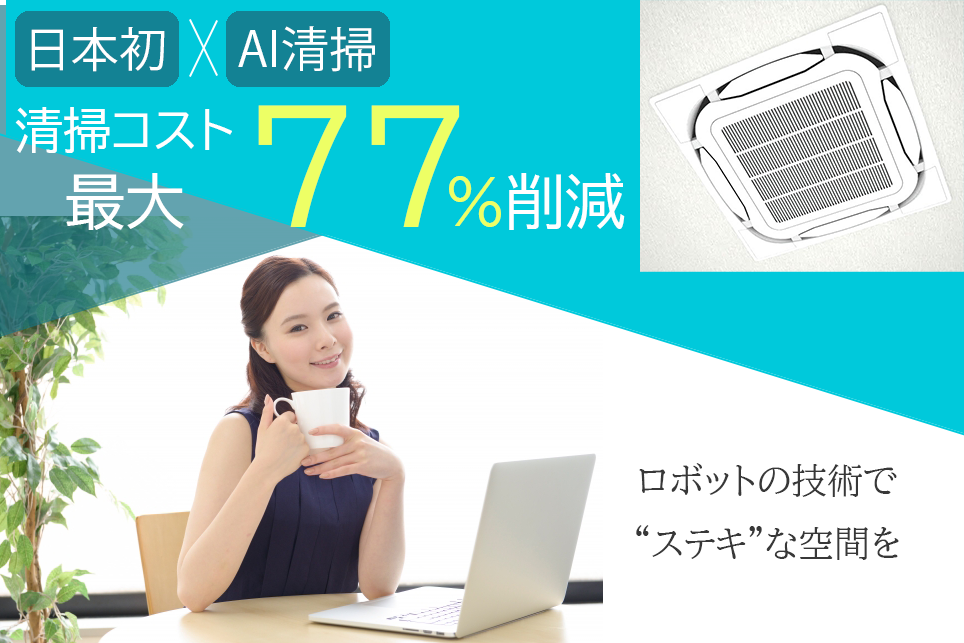
<style>
.page{position:relative;width:964px;height:643px;background:#ffffff}
.page>*{position:absolute;margin:0}
.t1{font:48px "KozGoPr6N-Regular";color:#ffffff}
.t2{font:48px "BIZ-UDPGothic";color:#ffffff}
.t3{font:150px "BIZ-UDPGothic";color:#edff65}
.t4{font:60px "BIZ-UDPGothic";color:#ffffff}
.t5{font:60px "BIZ-UDPGothic";color:#edff65}
.t6{font:36px "BIZ-UDPMincho-Medium";color:#383838}
</style>
<div class="page">
<p class="t1" style="left:31px;top:26px;width:344px;height:46px">日本初　  AI清掃</p>
<p class="t2" style="left:15px;top:107px;width:217px;height:46px">清掃コスト</p>
<p class="t3" style="left:258px;top:105px;width:202px;height:122px">７７</p>
<p class="t4" style="left:66px;top:173px;width:559px;height:57px">最大             <span class="t5">%</span>削減</p>
<p class="t6" style="left:636px;top:463px;width:263px;height:97px;text-align:center">ロボットの技術で<br>“ステキ”な空間を</p>
</div>
